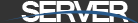
<style>
.page{position:relative;width:138px;height:23px;background:#333333}
.page>*{position:absolute;margin:0}
.t1{font:33.3px "Latha-Bold";letter-spacing:-0.12em;color:#ffffff}
</style>
<div class="page">
<p class="t1" style="left:21px;top:1px;width:108px;height:21px">SERVER</p>
</div>
